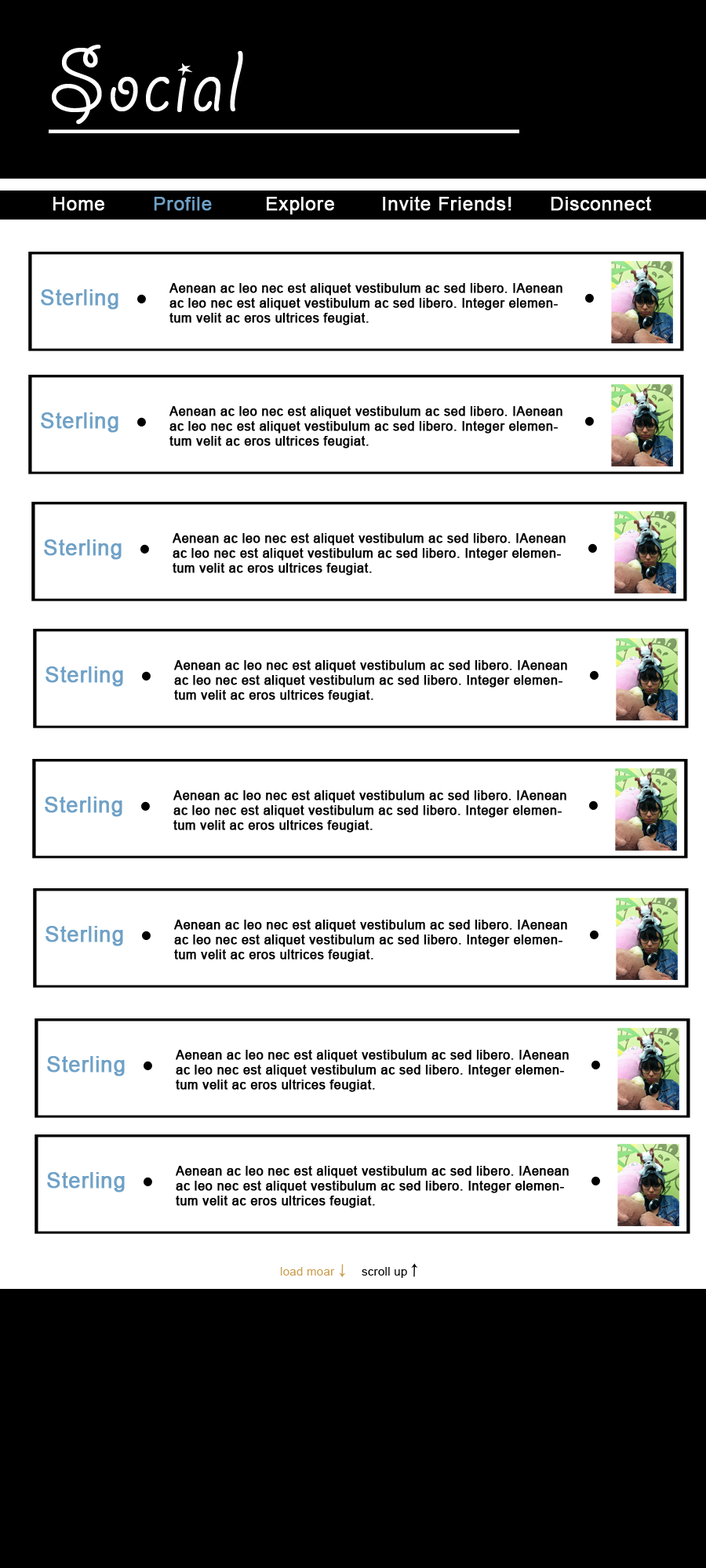
<style>
.page{position:relative;width:706px;height:1568px;background:#ffffff}
.page>*{position:absolute;margin:0}
.t1{font:97.2px "GiddyupStd";letter-spacing:0.02em;color:#ffffff}
.t2{font:18.8px "ArialMT";letter-spacing:0.02em;color:#ffffff;font-weight:bold}
.t3{font:18.8px "ArialMT";letter-spacing:0.02em;color:#6fa1c7;font-weight:bold}
.t4{font:21.2px "ArialMT";letter-spacing:0.02em;color:#6fa1c7;font-weight:bold}
.t5{font:12.5px "ArialMT";letter-spacing:0.02em;color:#000000;font-weight:bold}
.t6{font:11.8px "ArialMT";letter-spacing:0.02em;color:#cb9d4e}
.t7{font:11.8px "ArialMT";letter-spacing:0.02em;color:#000000}
</style>
<div class="page">
<p class="t1" style="left:52px;top:45px;width:191px;height:80px">Social</p>
<p class="t2" style="left:53px;top:197px;width:51px;height:14px">Home</p>
<p class="t3" style="left:154px;top:197px;width:58px;height:14px">Profile</p>
<p class="t2" style="left:267px;top:197px;width:67px;height:18px">Explore</p>
<p class="t2" style="left:383px;top:196px;width:128px;height:15px">Invite Friends!</p>
<p class="t2" style="left:550px;top:196px;width:102px;height:15px">Disconnect</p>
<p class="t4" style="left:41px;top:289px;width:77px;height:21px">Sterling</p>
<p class="t5" style="left:169px;top:283px;width:393px;height:42px">Aenean ac leo nec est aliquet vestibulum ac sed libero. IAenean ac leo nec est aliquet vestibulum ac sed libero. Integer elementum velit ac eros ultrices feugiat.</p>
<p class="t4" style="left:41px;top:412px;width:77px;height:21px">Sterling</p>
<p class="t5" style="left:169px;top:406px;width:393px;height:42px">Aenean ac leo nec est aliquet vestibulum ac sed libero. IAenean ac leo nec est aliquet vestibulum ac sed libero. Integer elementum velit ac eros ultrices feugiat.</p>
<p class="t5" style="left:172px;top:533px;width:393px;height:42px">Aenean ac leo nec est aliquet vestibulum ac sed libero. IAenean ac leo nec est aliquet vestibulum ac sed libero. Integer elementum velit ac eros ultrices feugiat.</p>
<p class="t4" style="left:44px;top:539px;width:78px;height:21px">Sterling</p>
<p class="t5" style="left:174px;top:660px;width:393px;height:42px">Aenean ac leo nec est aliquet vestibulum ac sed libero. IAenean ac leo nec est aliquet vestibulum ac sed libero. Integer elementum velit ac eros ultrices feugiat.</p>
<p class="t4" style="left:45px;top:666px;width:78px;height:21px">Sterling</p>
<p class="t4" style="left:45px;top:797px;width:77px;height:20px">Sterling</p>
<p class="t5" style="left:173px;top:790px;width:393px;height:43px">Aenean ac leo nec est aliquet vestibulum ac sed libero. IAenean ac leo nec est aliquet vestibulum ac sed libero. Integer elementum velit ac eros ultrices feugiat.</p>
<p class="t4" style="left:45px;top:926px;width:78px;height:20px">Sterling</p>
<p class="t5" style="left:174px;top:920px;width:393px;height:42px">Aenean ac leo nec est aliquet vestibulum ac sed libero. IAenean ac leo nec est aliquet vestibulum ac sed libero. Integer elementum velit ac eros ultrices feugiat.</p>
<p class="t5" style="left:176px;top:1050px;width:392px;height:42px">Aenean ac leo nec est aliquet vestibulum ac sed libero. IAenean ac leo nec est aliquet vestibulum ac sed libero. Integer elementum velit ac eros ultrices feugiat.</p>
<p class="t4" style="left:47px;top:1056px;width:78px;height:20px">Sterling</p>
<p class="t5" style="left:176px;top:1166px;width:392px;height:42px">Aenean ac leo nec est aliquet vestibulum ac sed libero. IAenean ac leo nec est aliquet vestibulum ac sed libero. Integer elementum velit ac eros ultrices feugiat.</p>
<p class="t4" style="left:47px;top:1172px;width:78px;height:20px">Sterling</p>
<p class="t6" style="left:280px;top:1267px;width:55px;height:9px">load moar</p>
<p class="t7" style="left:361px;top:1267px;width:46px;height:11px">scroll up</p>
</div>
